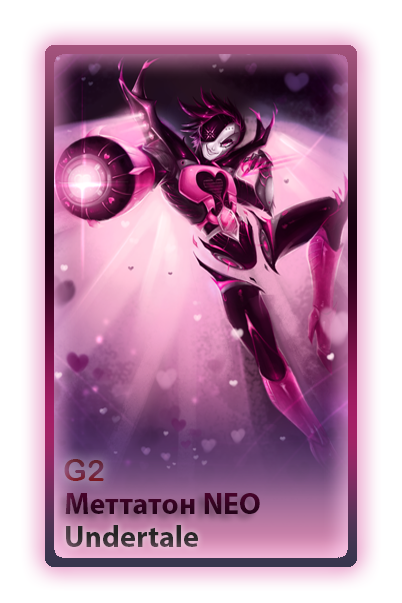
<style>
.page{position:relative;width:402px;height:603px}
.page>*{position:absolute;margin:0}
.t1{font:30px "ArialRoundedMTBold"}
.t2{font:30px "MyriadPro-Bold";color:#340321}
.t3{font:30px "MyriadPro-Bold";color:#242424}
</style>
<div class="page">
<p class="t1" style="left:64px;top:459px;width:40px;height:22px">G2</p>
<p class="t2" style="left:65px;top:493px;width:195px;height:21px">Меттатон NEO</p>
<p class="t3" style="left:66px;top:525px;width:132px;height:22px">Undertale</p>
</div>
